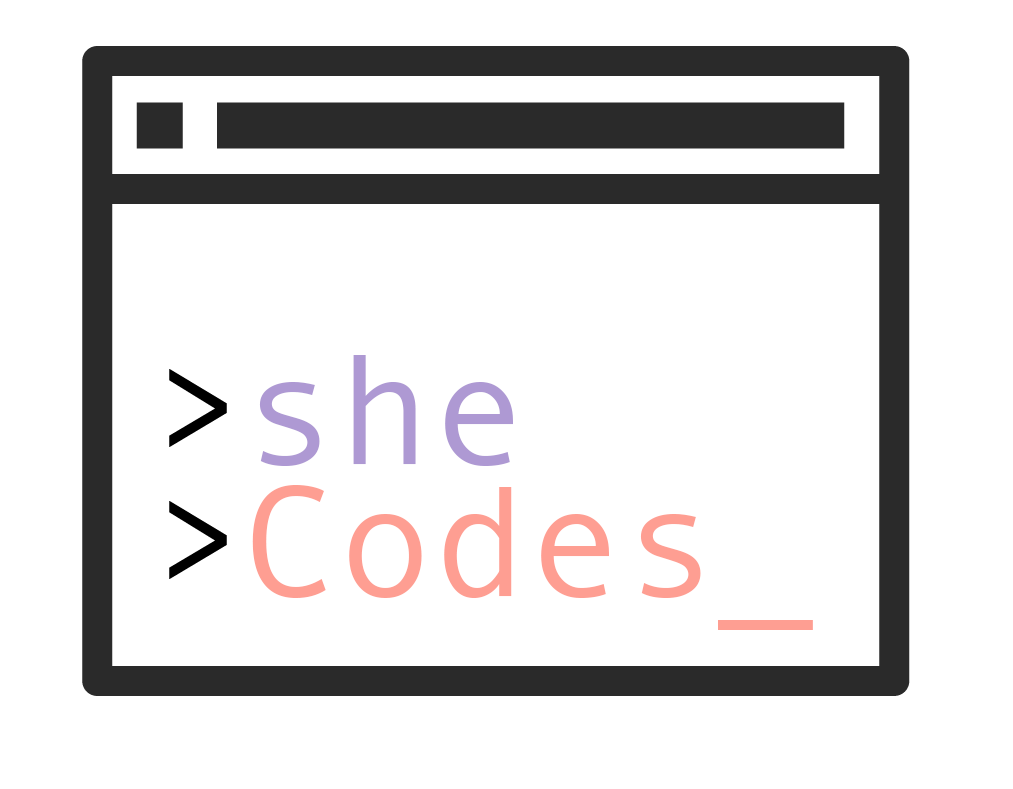
<style>
.page{position:relative;width:1013px;height:789px;background:#ffffff}
.page>*{position:absolute;margin:0}
.t1{font:158.3px "AndaleMono";letter-spacing:0.001em;color:#ae99d3}
.t2{font:158.3px "AndaleMono";color:#fe9e92}
</style>
<div class="page">
<p class="t1" style="left:259px;top:355px;width:254px;height:111px">she</p>
<p class="t2" style="left:252px;top:485px;width:561px;height:145px">Codes_</p>
</div>
